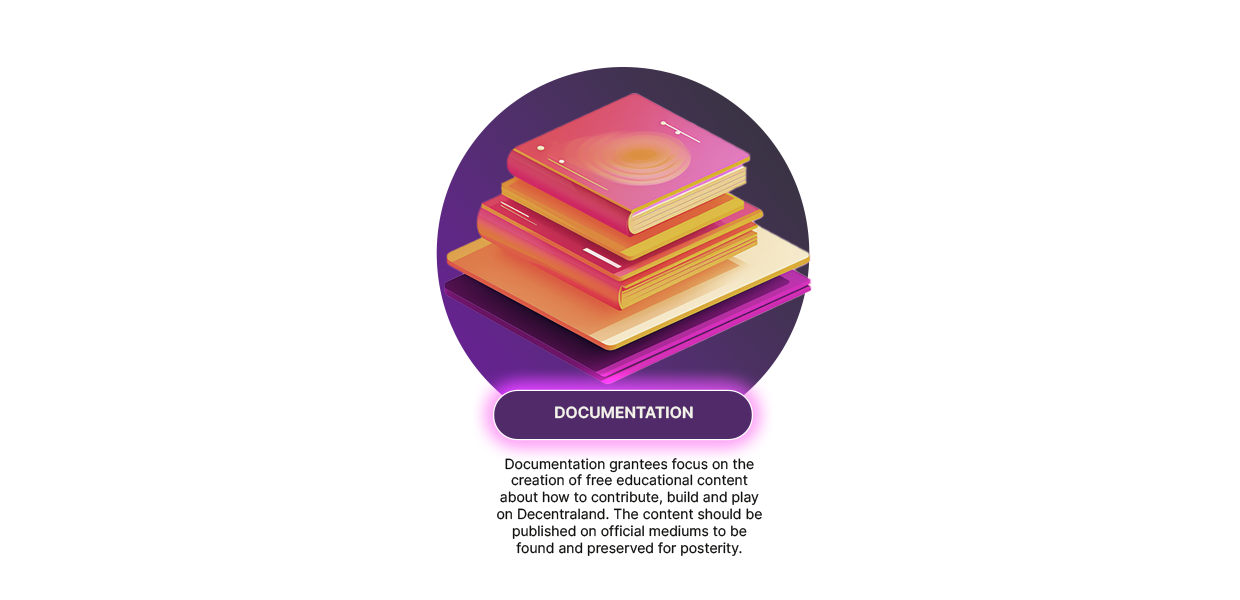
<style>
.page{position:relative;width:1240px;height:600px;background:#ffffff}
.page>*{position:absolute;margin:0}
.t1{font:15.4px "Inter-SemiBold";color:#f3f2eb;text-transform:uppercase}
.t2{font:14px "Inter-Regular";color:#111110}
</style>
<div class="page">
<p class="t1" style="left:555px;top:406px;width:138px;height:13px">Documentation</p>
<p class="t2" style="left:497px;top:458px;width:265px;height:98px;text-align:center">Documentation grantees focus on the creation of free educational content about how to contribute, build and play on Decentraland. The content should be published on official mediums to be found and preserved for posterity.</p>
</div>
